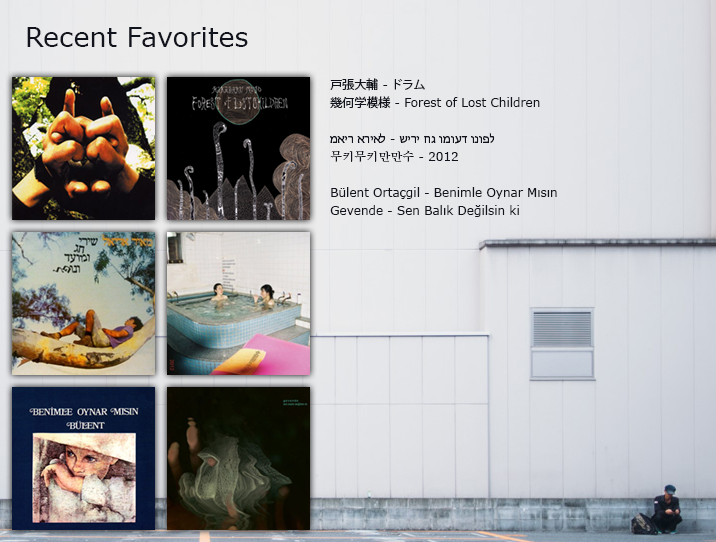
<style>
.page{position:relative;width:716px;height:542px}
.page>*{position:absolute;margin:0}
.t1{font:27px "Verdana";color:#11141d}
.t2{font:12px/18px "Verdana";color:#11141d}
.t3{font:12px/18px "KozGoPr6N-Regular";color:#11141d}
.t4{font:12px/18px "MyriadHebrew-Regular";color:#11141d}
.t5{font:12px/18px "AdobeMyungjoStd-Medium";color:#11141d}
</style>
<div class="page">
<p class="t1" style="left:27px;top:27px;width:221px;height:20px">Recent Favorites</p>
<p class="t2" style="left:330px;top:78px;width:227px;height:139px"><span class="t3">戸張大輔</span> - <span class="t3">ドラム</span><br><span class="t3">幾何学模様</span> - Forest of Lost Children<br><br><span class="t4">מאיר אריאל</span> - <span class="t4">שירי חג ומועד ונופל<br></span><span class="t5">무키무키만만수</span> - 2012<br><br>Bülent Ortaçgil - Benimle Oynar Mısın<br>Gevende - Sen Balık Değilsin ki</p>
</div>
